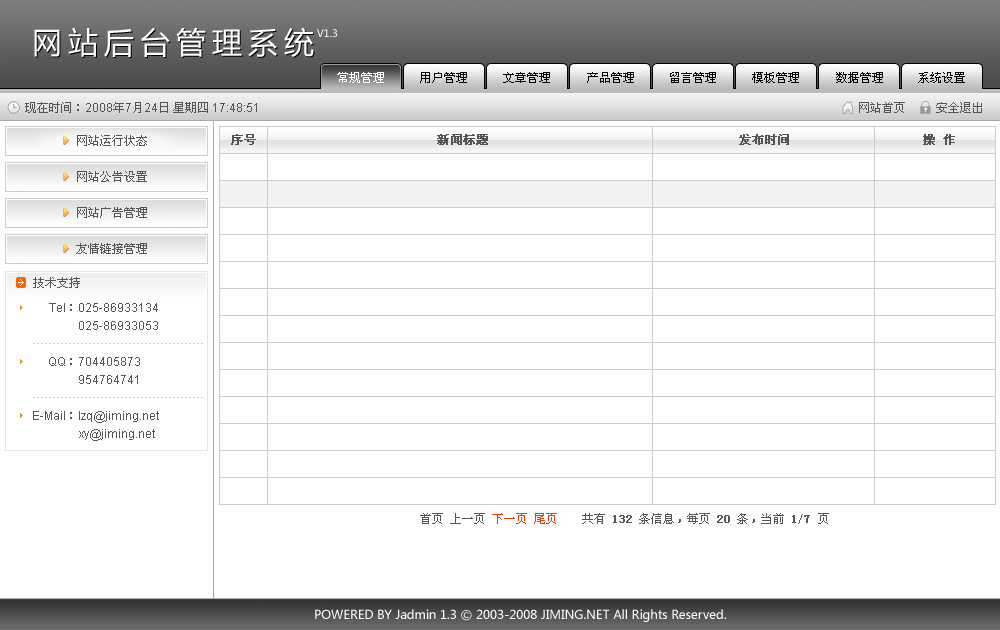
<style>
.page{position:relative;width:1000px;height:630px;background:#ffffff}
.page>*{position:absolute;margin:0}
.t1{font:30px "MicrosoftYaHei";letter-spacing:0.2em;color:#ffffff}
.t2{font:10px "MicrosoftYaHei";color:#ffffff}
.t3{font:12px "SimSun";color:#ffffff}
.t4{font:12px "SimSun";color:#000000}
.t5{font:12px "ArialMT";color:#555555}
.t6{font:12px "SimSun";color:#555555}
.t7{font:12px/36px "SimSun";color:#555555}
.t8{font:12px "SimSun";color:#555555;font-weight:bold}
.t9{font:12px/18px "ArialMT";color:#555555}
.t10{font:12px/18px "SimSun";color:#555555}
.t11{font:12px "SimSun";color:#ff3300}
.t12{font:12px "MicrosoftYaHei";color:#ffffff}
.t13{font:12px "Verdana";color:#ffffff}
</style>
<div class="page">
<p class="t1" style="left:34px;top:27px;width:280px;height:30px">网站后台管理系统</p>
<p class="t2" style="left:317px;top:29px;width:20px;height:8px">V1.3</p>
<p class="t3" style="left:337px;top:72px;width:47px;height:11px">常规管理</p>
<p class="t4" style="left:420px;top:72px;width:47px;height:11px">用户管理</p>
<p class="t4" style="left:503px;top:72px;width:47px;height:11px">文章管理</p>
<p class="t4" style="left:587px;top:72px;width:47px;height:11px">产品管理</p>
<p class="t4" style="left:670px;top:72px;width:46px;height:11px">留言管理</p>
<p class="t4" style="left:752px;top:72px;width:47px;height:11px">模板管理</p>
<p class="t4" style="left:836px;top:72px;width:47px;height:11px">数据管理</p>
<p class="t4" style="left:918px;top:72px;width:47px;height:11px">系统设置</p>
<p class="t5" style="left:25px;top:102px;width:232px;height:11px"><span class="t6">现在时间：</span>2008<span class="t6">年</span>7<span class="t6">月</span>24<span class="t6">日 星期四</span> 17:48:51</p>
<p class="t6" style="left:859px;top:102px;width:123px;height:11px">网站首页     安全退出</p>
<p class="t7" style="left:76px;top:135px;width:71px;height:119px;text-align:justify">网站运行状态<br>网站公告设置<br>网站广告管理<br>友情链接管理</p>
<p class="t8" style="left:231px;top:134px;width:25px;height:11px">序号</p>
<p class="t8" style="left:437px;top:134px;width:51px;height:11px">新闻标题</p>
<p class="t8" style="left:739px;top:134px;width:50px;height:11px">发布时间</p>
<p class="t8" style="left:923px;top:134px;width:32px;height:11px">操 作</p>
<p class="t6" style="left:33px;top:277px;width:47px;height:11px">技术支持</p>
<p class="t9" style="left:33px;top:303px;width:126px;height:138px;text-align:justify">Tel<span class="t10">：</span>025-86933134<br>               025-86933053<br><br>     QQ<span class="t10">：</span>704405873<br>               954764741<br><br>E-Mail<span class="t10">：</span>lzq@jiming.net<br>                xy@jiming.net</p>
<p class="t6" style="left:420px;top:513px;width:409px;height:11px">首页 上一页 <span class="t11">下一页 尾页 </span>   共有 <span class="t8">132</span> 条信息，每页 <span class="t8">20</span> 条，当前 <span class="t8">1</span>/<span class="t8">7 </span>页</p>
<p class="t12" style="left:315px;top:609px;width:411px;height:13px">POWERED BY Jadmin 1.3 <span class="t13">©</span> 2003-2008 JIMING.NET All Rights Reserved.</p>
</div>
